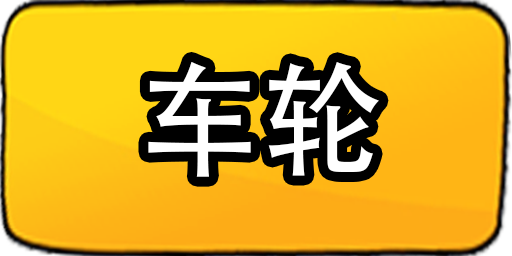
<style>
.page{position:relative;width:512px;height:256px}
.page>*{position:absolute;margin:0}
.t1{font:123.5px "AdobeHeitiStd-Regular";letter-spacing:0.012em;color:#ffffff}
.t2{font:123.5px "MyriadPro-Regular";letter-spacing:0.012em;color:#ffffff}
</style>
<div class="page">
<p class="t1" style="left:148px;top:61px;width:231px;height:116px"><span class="t2">  </span>车轮</p>
</div>
